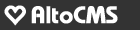
<style>
.page{position:relative;width:140px;height:30px;background:#333333}
.page>*{position:absolute;margin:0}
.t1{font:24px "MyFonto";color:#ffffff;font-weight:bold}
</style>
<div class="page">
<p class="t1" style="left:31px;top:6px;width:87px;height:18px">AltoCMS</p>
</div>
